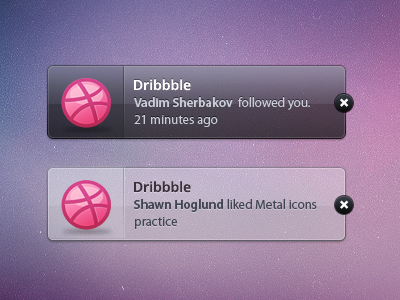
<style>
.page{position:relative;width:400px;height:300px}
.page>*{position:absolute;margin:0}
.t1{font:14px "OpenSans-Semibold";color:#ffffff}
.t2{font:13px/17px "MyriadPro-Regular";color:#c9cdd8}
.t3{font:13px/17px "MyriadPro-Semibold";color:#c9cdd8}
.t4{font:14px "OpenSans-Semibold";color:#39313a}
.t5{font:13px/17px "MyriadPro-Regular";color:#414551}
.t6{font:13px/17px "MyriadPro-Semibold";color:#414551}
</style>
<div class="page">
<p class="t1" style="left:134px;top:79px;width:57px;height:12px">Dribbble</p>
<p class="t2" style="left:134px;top:97px;width:176px;height:30px"><span class="t3">Vadim Sherbakov  </span>followed you.<br>21 minutes ago</p>
<p class="t4" style="left:134px;top:181px;width:57px;height:12px">Dribbble</p>
<p class="t5" style="left:134px;top:199px;width:183px;height:30px"><span class="t6">Shawn Hoglund </span>liked Metal icons <br>practice</p>
</div>
